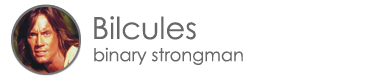
<style>
.page{position:relative;width:380px;height:82px;background:#ffffff}
.page>*{position:absolute;margin:0}
.t1{font:30.4px "CenturyGothic";color:#696768}
.t2{font:17.8px "CenturyGothic";color:#696768}
</style>
<div class="page">
<p class="t1" style="left:94px;top:16px;width:102px;height:24px">Bilcules</p>
<p class="t2" style="left:94px;top:47px;width:149px;height:18px">binary strongman</p>
</div>
